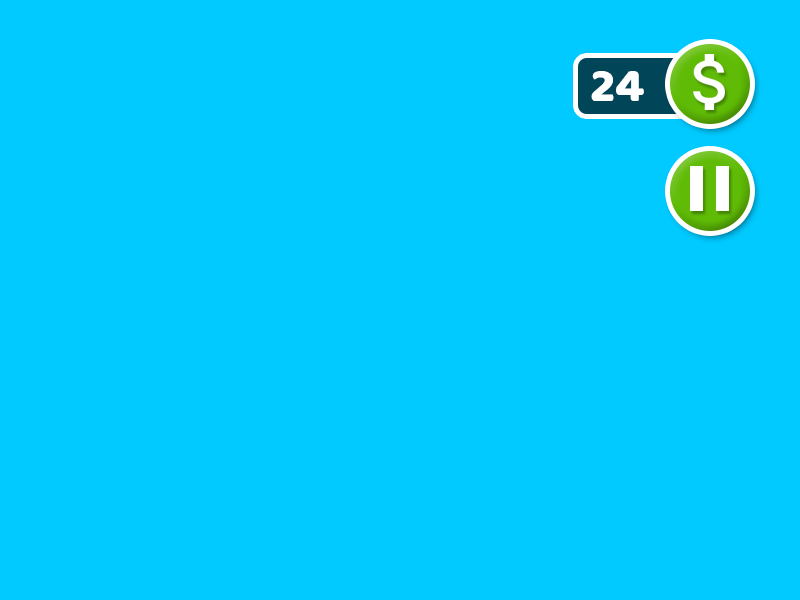
<style>
.page{position:relative;width:800px;height:600px;background:#00caff}
.page>*{position:absolute;margin:0}
.t1{font:48px "Baloo-Regular";color:#ffffff}
</style>
<div class="page">
<p class="t1" style="left:591px;top:71px;width:53px;height:30px">24</p>
</div>
